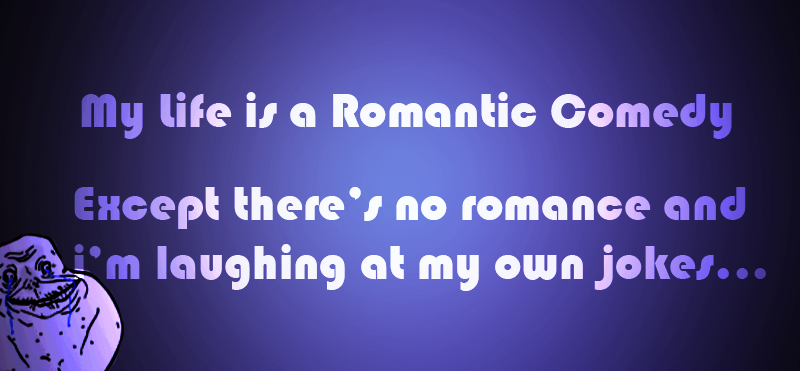
<style>
.page{position:relative;width:800px;height:371px}
.page>*{position:absolute;margin:0}
.t1{font:49px "Bauhaus93"}
</style>
<div class="page">
<p class="t1" style="left:81px;top:92px;width:651px;height:47px">My Life is a Romantic Comedy</p>
<p class="t1" style="left:81px;top:92px;width:651px;height:47px">My Life is a Romantic Comedy</p>
<p class="t1" style="left:74px;top:187px;width:692px;height:104px">Except there’s no romance and i’m laughing at my own jokes...</p>
<p class="t1" style="left:74px;top:187px;width:692px;height:104px">Except there’s no romance and i’m laughing at my own jokes...</p>
</div>
